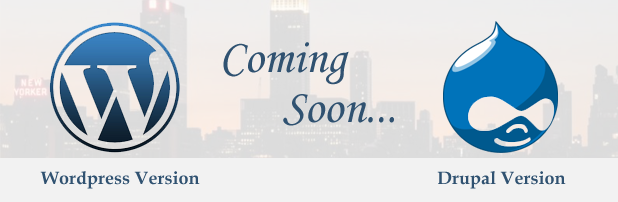
<style>
.page{position:relative;width:618px;height:202px;background:#f2f2f2}
.page>*{position:absolute;margin:0}
.t1{font:48px/50px "MonotypeCorsiva";color:#305271}
.t2{font:18px "BookAntiqua-Bold";color:#305271}
</style>
<div class="page">
<p class="t1" style="left:223px;top:42px;width:171px;height:84px">Coming <br>      Soon...</p>
<p class="t2" style="left:40px;top:171px;width:160px;height:18px">Wordpress Version</p>
<p class="t2" style="left:437px;top:171px;width:129px;height:18px">Drupal Version</p>
</div>
